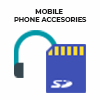
<style>
.page{position:relative;width:100px;height:100px;background:#fefefe}
.page>*{position:absolute;margin:0}
.t1{font:6.7px "Montserrat-Bold";color:#1e1c1d;text-transform:uppercase}
</style>
<div class="page">
<p class="t1" style="left:14px;top:9px;width:73px;height:13px;text-align:center">mobile <br>phone accesories</p>
</div>
